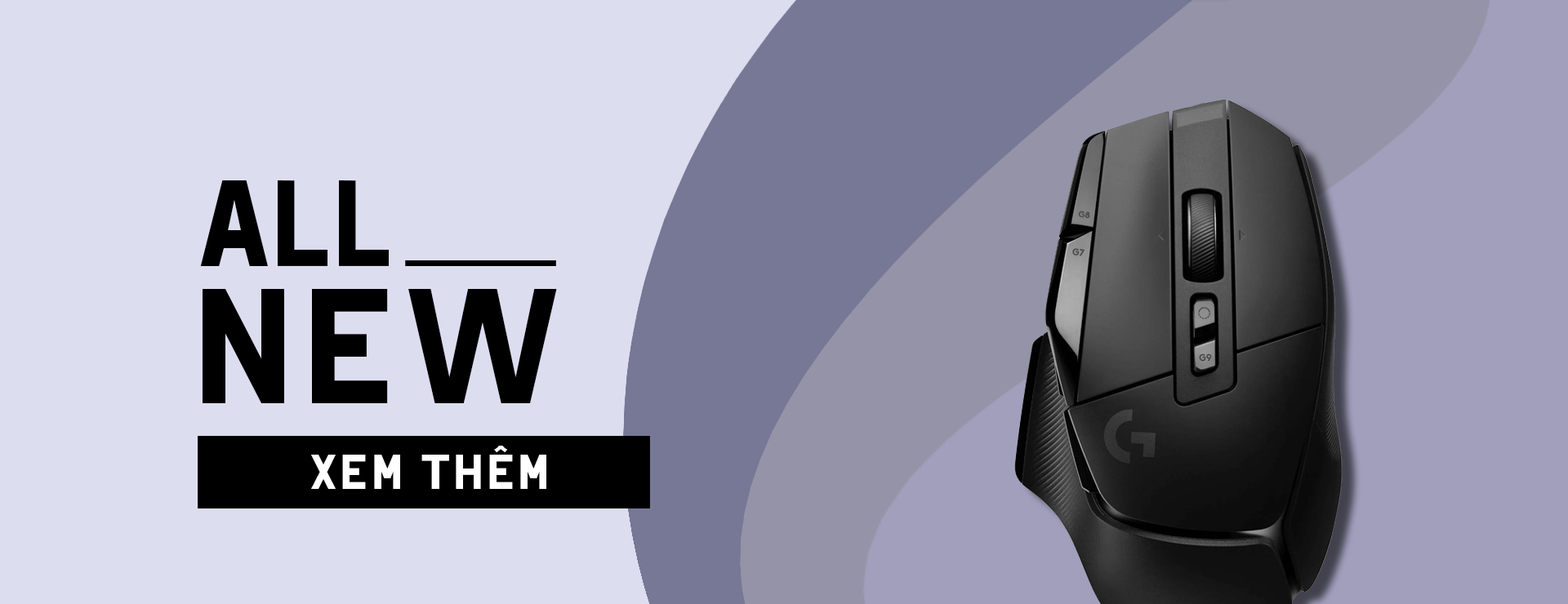
<style>
.page{position:relative;width:1568px;height:604px;background:#dcddef}
.page>*{position:absolute;margin:0}
.t1{font:122.5px "HotelDeParisXe";letter-spacing:0.03em;color:#000000}
.t2{font:163.3px "HotelDeParisXe";letter-spacing:0.1em;color:#000000}
.t3{font:49px "HotelDeParisXe";letter-spacing:0.1em;color:#ffffff}
</style>
<div class="page">
<p class="t1" style="left:200px;top:180px;width:189px;height:86px">ALL</p>
<p class="t2" style="left:203px;top:289px;width:354px;height:114px">new</p>
<p class="t3" style="left:311px;top:446px;width:235px;height:43px">XEM THÊM</p>
</div>
